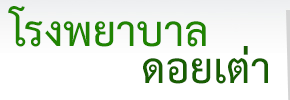
<style>
.page{position:relative;width:290px;height:100px;background:#ffffff}
.page>*{position:absolute;margin:0}
.t1{font:61px "THSarabunPSK-Bold";color:#208401}
.t2{font:61px "THSarabunPSK-Bold";color:#185e03}
</style>
<div class="page">
<p class="t1" style="left:8px;top:6px;width:198px;height:41px">โรงพยาบาล</p>
<p class="t2" style="left:143px;top:46px;width:125px;height:38px">ดอยเต่า</p>
</div>
